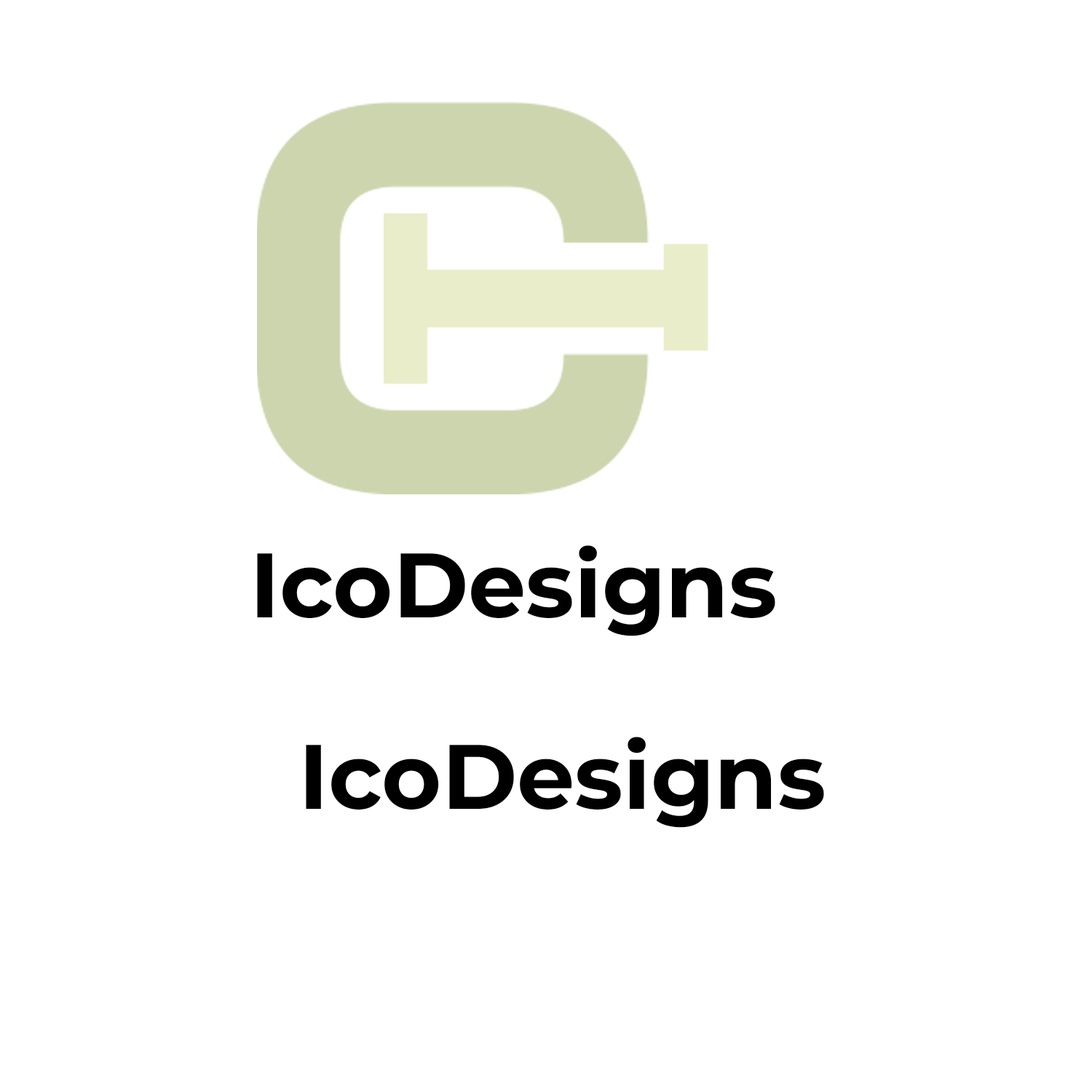
<style>
.page{position:relative;width:1092px;height:1092px;background:#ffffff}
.page>*{position:absolute;margin:0}
.t1{font:91.3px "MontserratRoman-Bold";color:#000000}
.t2{font:10px "MontserratRoman-Bold";color:#ffffff}
</style>
<div class="page">
<p class="t1" style="left:257px;top:545px;width:533px;height:91px">IcoDesigns<span class="t2">ns</span></p>
<p class="t1" style="left:306px;top:737px;width:533px;height:91px">IcoDesigns<span class="t2">ns</span></p>
</div>
